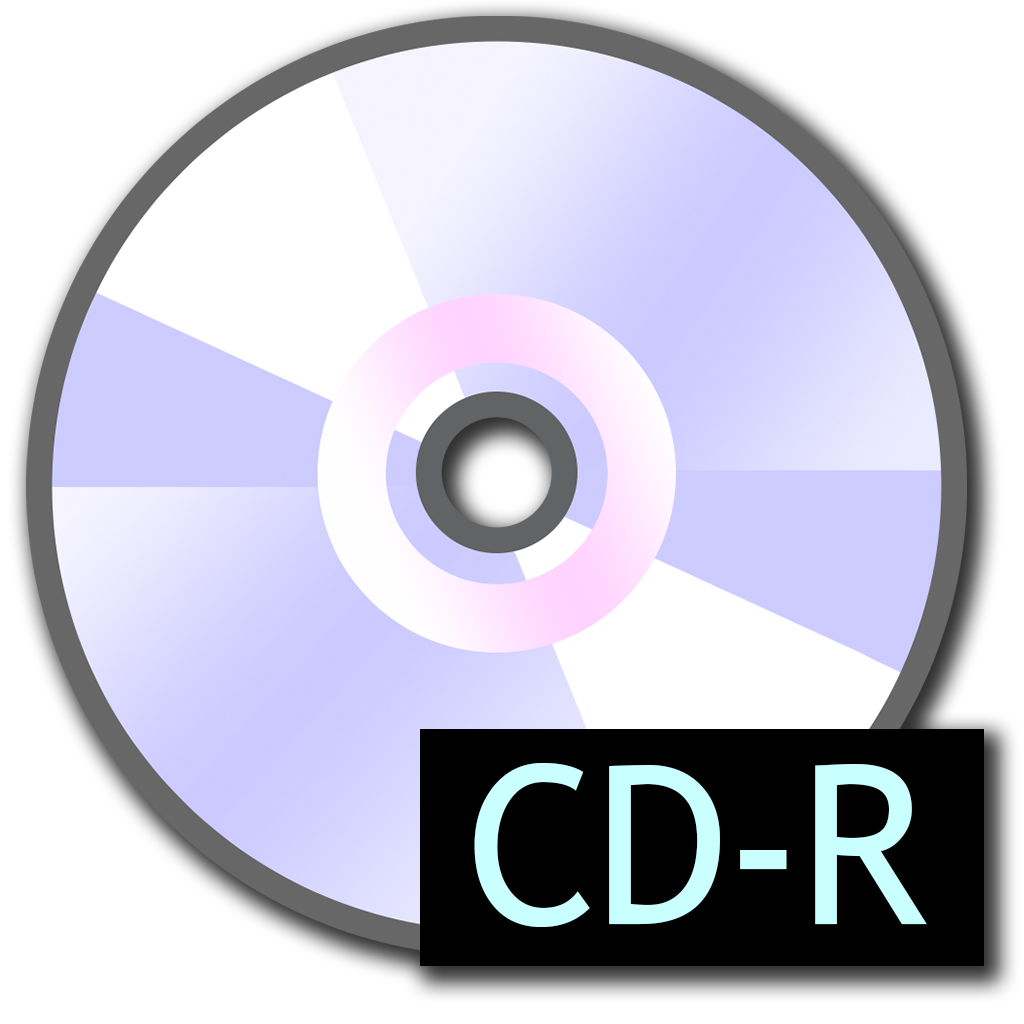
<style>
.page{position:relative;width:1024px;height:1024px;background:#ffffff}
.page>*{position:absolute;margin:0}
.t1{font:220.9px "TrebuchetMS";letter-spacing:-0.025em;color:#caffff}
</style>
<div class="page">
<p class="t1" style="left:474px;top:763px;width:453px;height:164px">CD-R</p>
</div>
